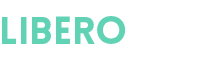
<style>
.page{position:relative;width:200px;height:60px;background:#ffffff}
.page>*{position:absolute;margin:0}
.t1{font:38px "Lovelo-Black";color:#61d2b4}
</style>
<div class="page">
<p class="t1" style="left:2px;top:16px;width:124px;height:28px">LIBERO</p>
</div>
